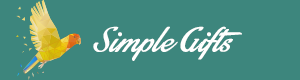
<style>
.page{position:relative;width:300px;height:80px;background:#3d867d}
.page>*{position:absolute;margin:0}
.t1{font:37.5px "StainyPersonalUseOnly";color:#fffffe}
</style>
<div class="page">
<p class="t1" style="left:93px;top:26px;width:149px;height:35px">Simple Gifts</p>
</div>
